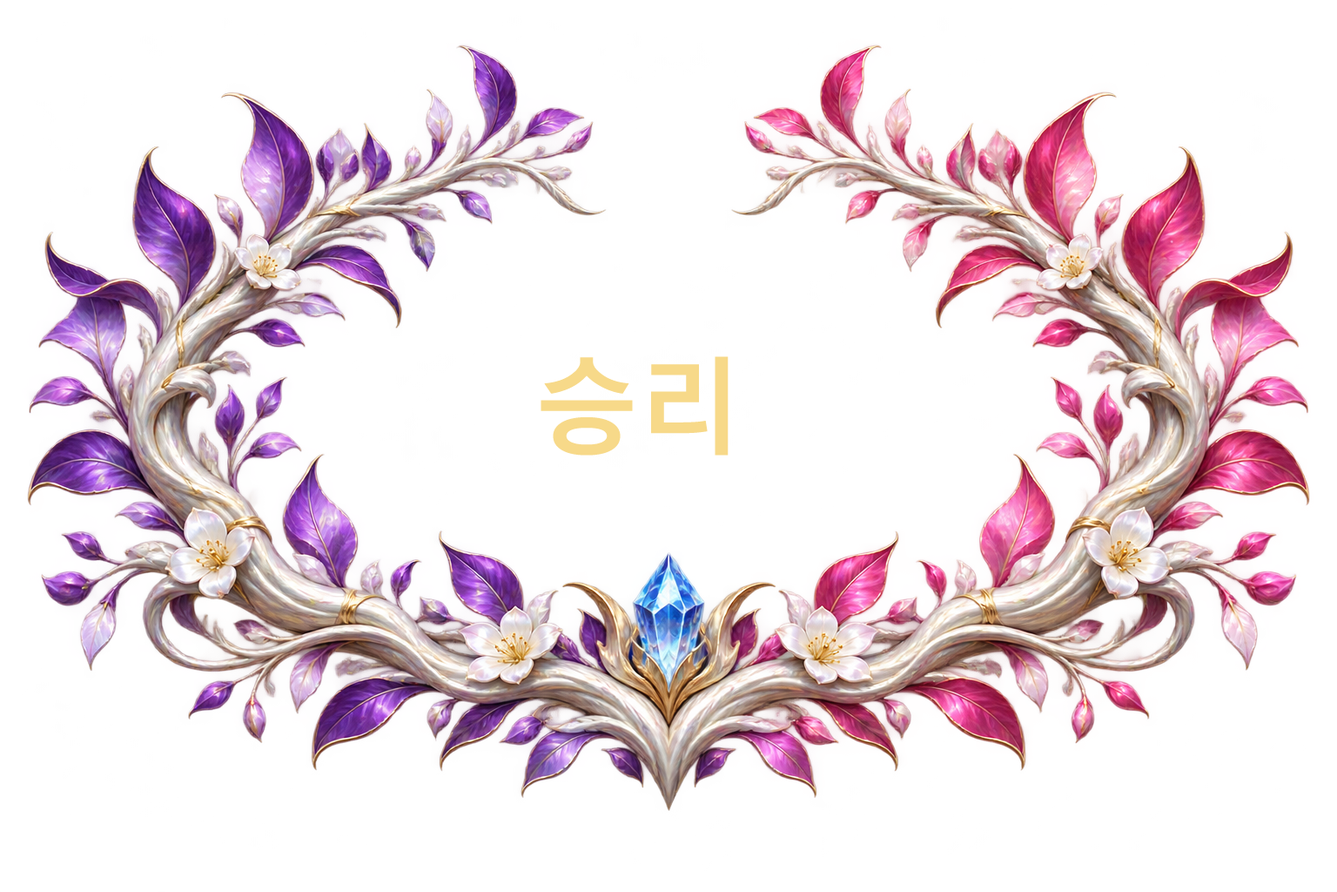
<style>
.page{position:relative;width:1337px;height:892px;background:#ffffff}
.page>*{position:absolute;margin:0}
.t1{font:104.5px "MalgunGothicBold";color:#f7d989}
</style>
<div class="page">
<p class="t1" style="left:541px;top:356px;width:188px;height:99px">승리</p>
</div>
